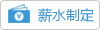
<style>
.page{position:relative;width:100px;height:30px;background:#ffffff}
.page>*{position:absolute;margin:0}
.t1{font:14px "MicrosoftYaHei";color:#3998d6}
</style>
<div class="page">
<p class="t1" style="left:38px;top:8px;width:56px;height:15px">薪水制定</p>
</div>
